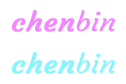
<style>
.page{position:relative;width:126px;height:84px;background:#ffffff}
.page>*{position:absolute;margin:0}
.t1{font:25.5px "Courgette-Regular";color:#f287ff;font-weight:bold;scale:1.16 1}
.t2{font:25.5px "Courgette-Regular";color:#f287ff;scale:1.16 1}
.t3{font:25.5px "Courgette-Regular";color:#87f5ff;font-weight:bold;scale:1.16 1}
.t4{font:25.5px "Courgette-Regular";color:#87f5ff;scale:1.16 1}
</style>
<div class="page">
<p class="t1" style="left:12px;top:10px;width:103px;height:22px">chen<span class="t2">bin</span></p>
<p class="t3" style="left:12px;top:52px;width:103px;height:22px">chen<span class="t4">bin</span></p>
</div>
